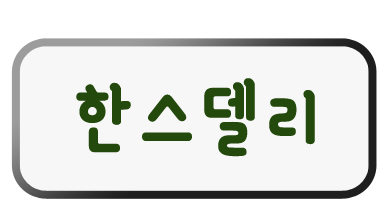
<style>
.page{position:relative;width:384px;height:224px;background:#f7f7f7}
.page>*{position:absolute;margin:0}
.t1{font:90px "YanoljaYacheB";letter-spacing:0.1em;color:#24490c}
</style>
<div class="page">
<p class="t1" style="left:76px;top:78px;width:239px;height:79px">한스델리</p>
</div>
